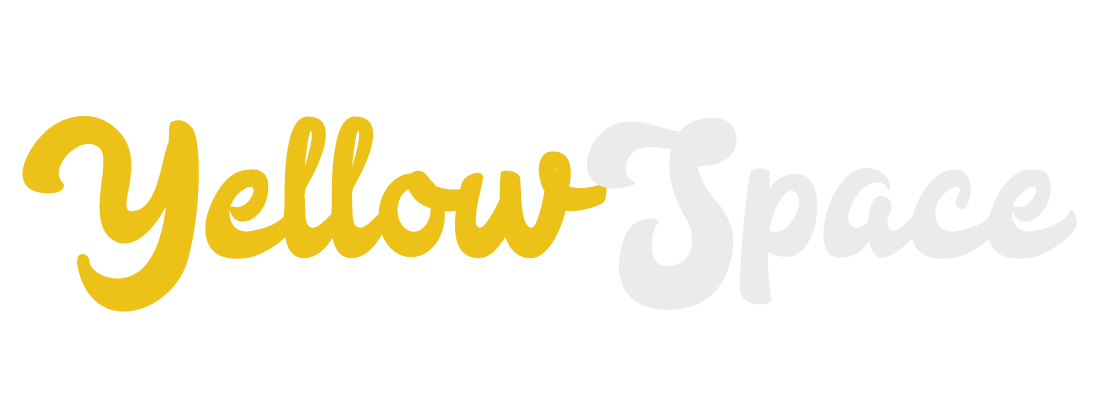
<style>
.page{position:relative;width:1100px;height:400px;background:#ffffff}
.page>*{position:absolute;margin:0}
.t1{font:192.2px "AnggadaFREE";color:#ecc219}
.t2{font:192.2px "AnggadaFREE";color:#ebebeb}
</style>
<div class="page">
<p class="t1" style="left:22px;top:115px;width:1055px;height:197px">Yellow<span class="t2">Space</span></p>
</div>
